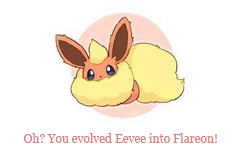
<style>
.page{position:relative;width:240px;height:160px;background:#ffffff}
.page>*{position:absolute;margin:0}
.t1{font:12px "Georgia";color:#dd817e}
</style>
<div class="page">
<p class="t1" style="left:23px;top:133px;width:194px;height:10px">Oh? You evolved Eevee into Flareon!</p>
</div>
